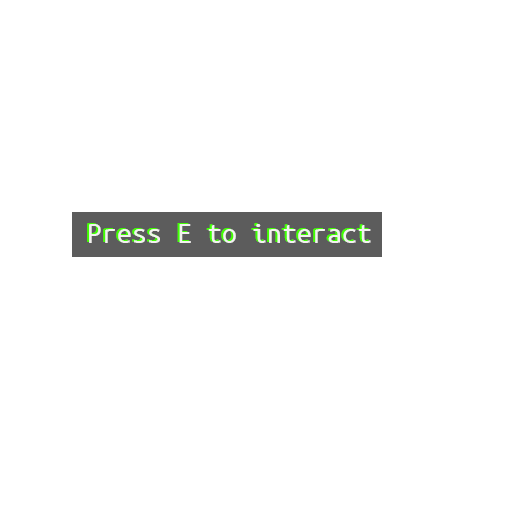
<style>
.page{position:relative;width:512px;height:512px;background:#ffffff}
.page>*{position:absolute;margin:0}
.t1{font:30px "UbuntuMono-Regular"}
.t2{font:30px "UbuntuMono-Regular";color:#f2f1ef}
</style>
<div class="page">
<p class="t1" style="left:87px;top:223px;width:282px;height:19px">Press E to interact</p>
<p class="t2" style="left:89px;top:224px;width:282px;height:19px">Press E to interact</p>
</div>
